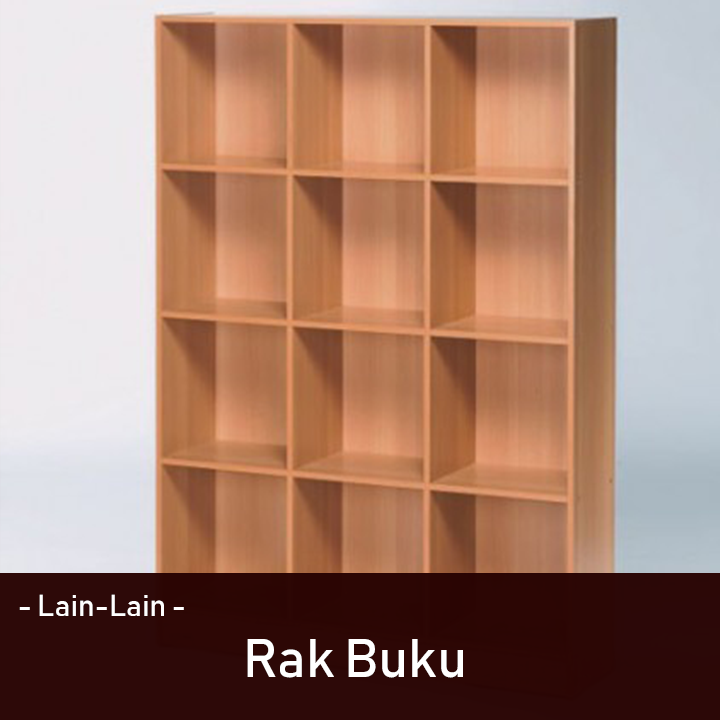
<style>
.page{position:relative;width:720px;height:720px}
.page>*{position:absolute;margin:0}
.t1{font:30px "Bahnschrift";color:#ffffff}
.t2{font:53.6px "Bahnschrift";color:#ffffff}
</style>
<div class="page">
<p class="t1" style="left:19px;top:594px;width:165px;height:22px">- Lain-Lain -</p>
<p class="t2" style="left:247px;top:639px;width:216px;height:39px">Rak Buku</p>
</div>
